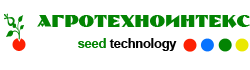
<style>
.page{position:relative;width:250px;height:70px;background:#ffffff}
.page>*{position:absolute;margin:0}
.t1{font:17.8px "Pilotka";color:#038403}
.t2{font:12.5px "Arial-BoldMT";color:#010101}
.t3{font:12.5px "Arial-BoldMT";color:#038403}
</style>
<div class="page">
<p class="t1" style="left:37px;top:15px;width:213px;height:13px">АГРОТЕХНОИНТЕКС</p>
<p class="t2" style="left:78px;top:38px;width:99px;height:13px"><span class="t3">seed </span>technology</p>
</div>
